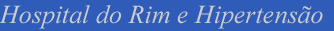
<style>
.page{position:relative;width:334px;height:31px;background:#2e5cb8}
.page>*{position:absolute;margin:0}
.t1{font:26px "TimesNewRomanPS-ItalicMT";color:#cccccc}
</style>
<div class="page">
<p class="t1" style="left:0px;top:5px;width:323px;height:24px">Hospital do Rim e Hipertensão</p>
</div>
